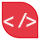
<style>
.page{position:relative;width:40px;height:40px;background:#e63946}
.page>*{position:absolute;margin:0}
.t1{font:20px "MyriadPro-BoldIt";color:#f7f2f2}
</style>
<div class="page">
<p class="t1" style="left:3px;top:13px;width:33px;height:15px">&lt; /&gt;</p>
</div>
